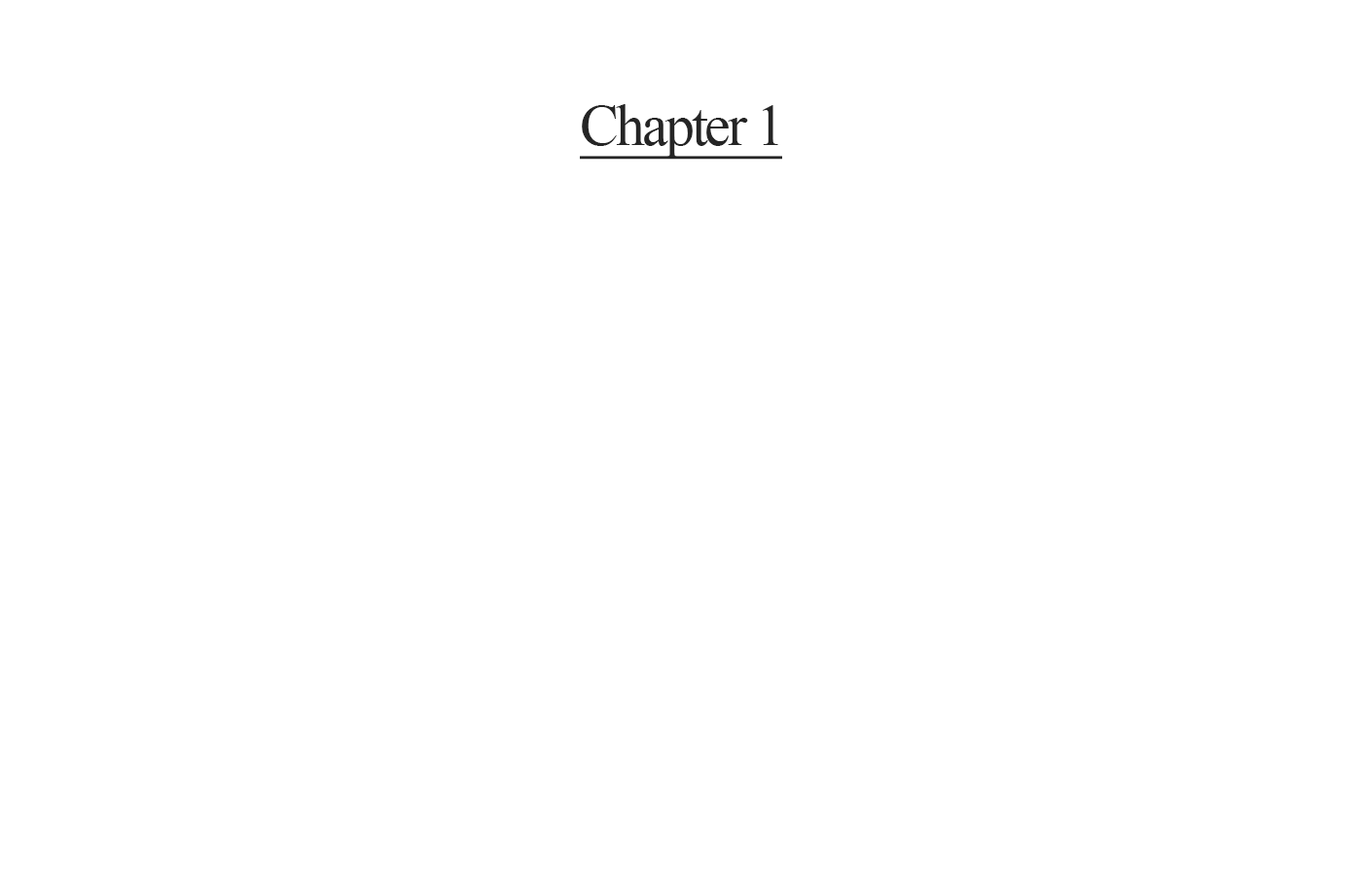
<style>
.page{position:relative;width:1362px;height:876px;background:#ffffff}
.page>*{position:absolute;margin:0}
.t1{font:58.4px "TimesNewRomanPSMT";letter-spacing:-0.05em;color:#252525;text-decoration:underline}
</style>
<div class="page">
<p class="t1" style="left:580px;top:104px;width:202px;height:56px">Chapter 1</p>
</div>
